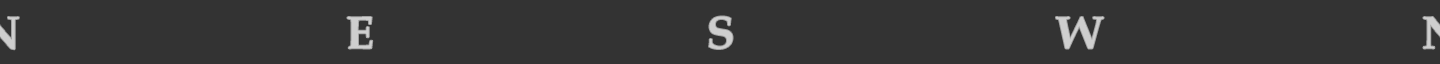
<style>
.page{position:relative;width:1440px;height:64px;background:#333333}
.page>*{position:absolute;margin:0}
.t1{font:46px "BookAntiqua-Bold";letter-spacing:0.02em;color:#cecece}
</style>
<div class="page">
<p class="t1" style="left:347px;top:17px;width:26px;height:32px">E</p>
<p class="t1" style="left:709px;top:16px;width:24px;height:33px">S</p>
<p class="t1" style="left:1056px;top:17px;width:48px;height:32px">W</p>
</div>
